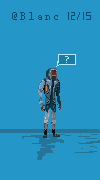
<style>
.page{position:relative;width:100px;height:180px;background:#2596c8}
.page>*{position:absolute;margin:0}
.t1{font:10.7px "FZXS12--GB1-0";letter-spacing:0.2em;color:#064b69}
</style>
<div class="page">
<p class="t1" style="left:12px;top:12px;width:46px;height:8px">@Blanc</p>
</div>
